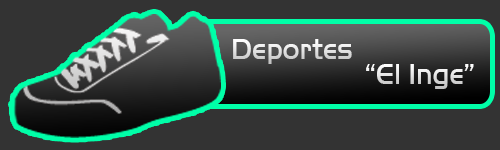
<style>
.page{position:relative;width:500px;height:150px;background:#333333}
.page>*{position:absolute;margin:0}
.t1{font:30px "HandelGotD-Ligh";color:#e4e4e4}
.t2{font:30px "HandelGotD-Ligh"}
</style>
<div class="page">
<p class="t1" style="left:233px;top:39px;width:119px;height:25px">Deportes</p>
<p class="t2" style="left:366px;top:64px;width:108px;height:25px">“El Inge”</p>
</div>
